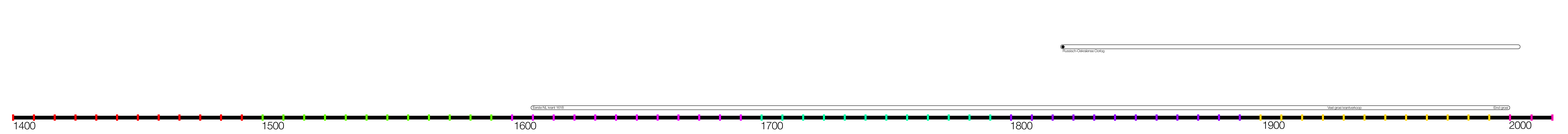
<style>
.page{position:relative;width:1568px;height:134px;background:#ffffff}
.page>*{position:absolute;margin:0}
.t1{font:3.6px "HelveticaNeue-Light";letter-spacing:-0.025em;color:#000000}
.t2{font:10.6px "HelveticaNeue-Light";letter-spacing:-0.025em;color:#000000;text-transform:uppercase}
</style>
<div class="page">
<p class="t1" style="left:1063px;top:50px;width:41px;height:3px">Russisch-Oekraïense Oorlog</p>
<p class="t1" style="left:533px;top:107px;width:31px;height:2px">Eerste NL krant 1618</p>
<p class="t1" style="left:1327px;top:107px;width:35px;height:3px">Veel groei krantverkoop</p>
<p class="t1" style="left:1494px;top:107px;width:14px;height:3px">Eind groei</p>
<p class="t2" style="left:14px;top:122px;width:21px;height:8px">1400</p>
<p class="t2" style="left:263px;top:122px;width:21px;height:8px">1500</p>
<p class="t2" style="left:515px;top:122px;width:21px;height:8px">1600</p>
<p class="t2" style="left:762px;top:122px;width:21px;height:8px">1700</p>
<p class="t2" style="left:1011px;top:122px;width:21px;height:8px">1800</p>
<p class="t2" style="left:1263px;top:122px;width:22px;height:7px">1900</p>
<p class="t2" style="left:1509px;top:122px;width:22px;height:7px">2000</p>
</div>
